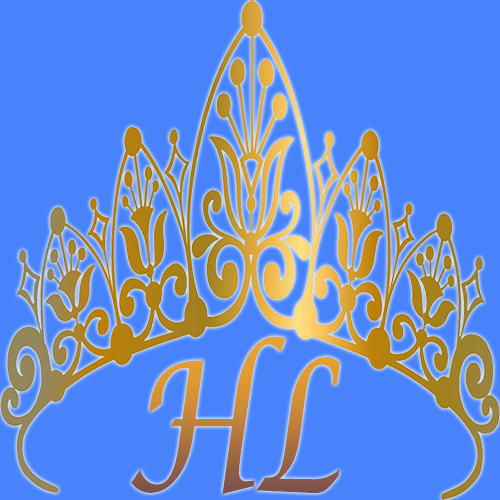
<style>
.page{position:relative;width:500px;height:500px;background:#4883fc}
.page>*{position:absolute;margin:0}
.t1{font:179.8px "LucidaCalligraphy-Italic";scale:0.7 1}
</style>
<div class="page">
<p class="t1" style="left:131px;top:336px;width:209px;height:158px">HL</p>
</div>
